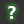
<style>
.page{position:relative;width:24px;height:24px;background:#333333}
.page>*{position:absolute;margin:0}
.t1{font:18px "SegoeUI-Bold";color:#ffffff}
</style>
<div class="page">
<p class="t1" style="left:8px;top:6px;width:8px;height:13px">?</p>
</div>
